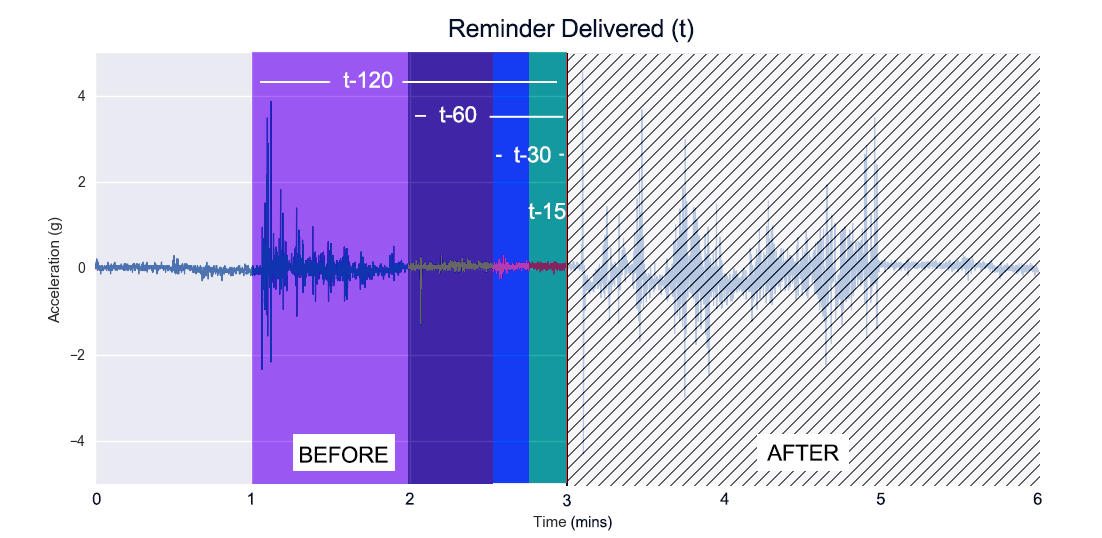
<style>
.page{position:relative;width:1102px;height:538px;background:#ffffff}
.page>*{position:absolute;margin:0}
.t1{font:25px "ArialMT";letter-spacing:-0.01em;color:#04102a}
.t2{font:22.2px "ArialMT";letter-spacing:-0.01em;color:#ffffff}
.t3{font:22.2px "ArialMT";letter-spacing:-0.01em;color:#000000}
.t4{font:12px "ArialMT";letter-spacing:-0.01em;color:#04102a}
.t5{font:16.7px "ArialMT";letter-spacing:-0.01em;color:#04102a}
.t6{font:15.3px "ArialMT";letter-spacing:-0.01em;color:#04102a}
</style>
<div class="page">
<p class="t1" style="left:449px;top:18px;width:245px;height:25px">Reminder Delivered (t)</p>
<p class="t2" style="left:343px;top:71px;width:50px;height:17px">t-120</p>
<p class="t2" style="left:439px;top:106px;width:38px;height:17px">t-60</p>
<p class="t2" style="left:514px;top:146px;width:37px;height:17px">t-30</p>
<p class="t2" style="left:528px;top:202px;width:38px;height:18px">t-15</p>
<p class="t3" style="left:300px;top:446px;width:88px;height:17px">BEFORE</p>
<p class="t3" style="left:767px;top:444px;width:72px;height:17px">AFTER</p>
<p class="t4" style="left:92px;top:492px;width:9px;height:13px">0</p>
<p class="t4" style="left:248px;top:492px;width:5px;height:13px">1</p>
<p class="t4" style="left:405px;top:492px;width:9px;height:13px">2</p>
<p class="t5" style="left:562px;top:494px;width:9px;height:13px">3</p>
<p class="t4" style="left:720px;top:492px;width:9px;height:13px">4</p>
<p class="t4" style="left:876px;top:492px;width:9px;height:13px">5</p>
<p class="t4" style="left:1033px;top:492px;width:9px;height:13px">6</p>
<p class="t6" style="left:571px;top:515px;width:41px;height:16px">(mins)</p>
</div>
